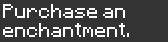
<style>
.page{position:relative;width:168px;height:42px;background:#333333}
.page>*{position:absolute;margin:0}
.t1{font:16px "Minecraftia-Regular";color:#ffffff}
</style>
<div class="page">
<p class="t1" style="left:3px;top:4px;width:126px;height:33px">Purchase an<br>enchantment.</p>
</div>
